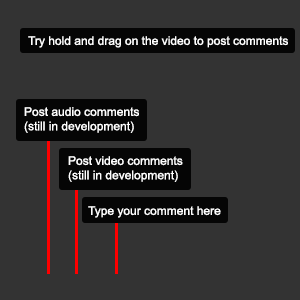
<style>
.page{position:relative;width:300px;height:300px;background:#333333}
.page>*{position:absolute;margin:0}
.t1{font:12px "ArialMT";color:#ffffff}
</style>
<div class="page">
<p class="t1" style="left:28px;top:36px;width:260px;height:12px">Try hold and drag on the video to post comments</p>
<p class="t1" style="left:24px;top:107px;width:115px;height:26px">Post audio comments<br>(still in development)</p>
<p class="t1" style="left:68px;top:156px;width:115px;height:26px">Post video comments<br>(still in development)</p>
<p class="t1" style="left:88px;top:206px;width:133px;height:12px">Type your comment here</p>
</div>
